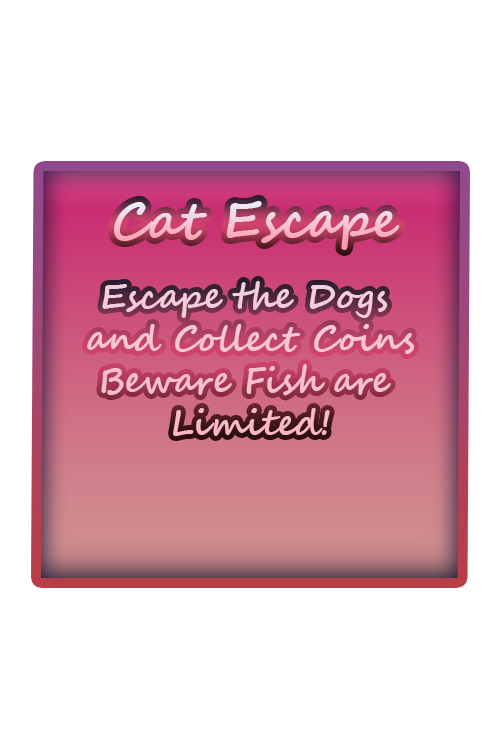
<style>
.page{position:relative;width:500px;height:750px;background:#ffffff}
.page>*{position:absolute;margin:0}
.t1{font:50px "SegoeScript-Bold"}
.t2{font:35px "SegoeScript-Bold";color:#f7c5d4}
</style>
<div class="page">
<p class="t1" style="left:114px;top:201px;width:286px;height:49px">Cat Escape</p>
<p class="t2" style="left:87px;top:281px;width:328px;height:155px;text-align:center">Escape the Dogs <br>and Collect Coins<br>Beware Fish are <br>Limited!</p>
</div>
